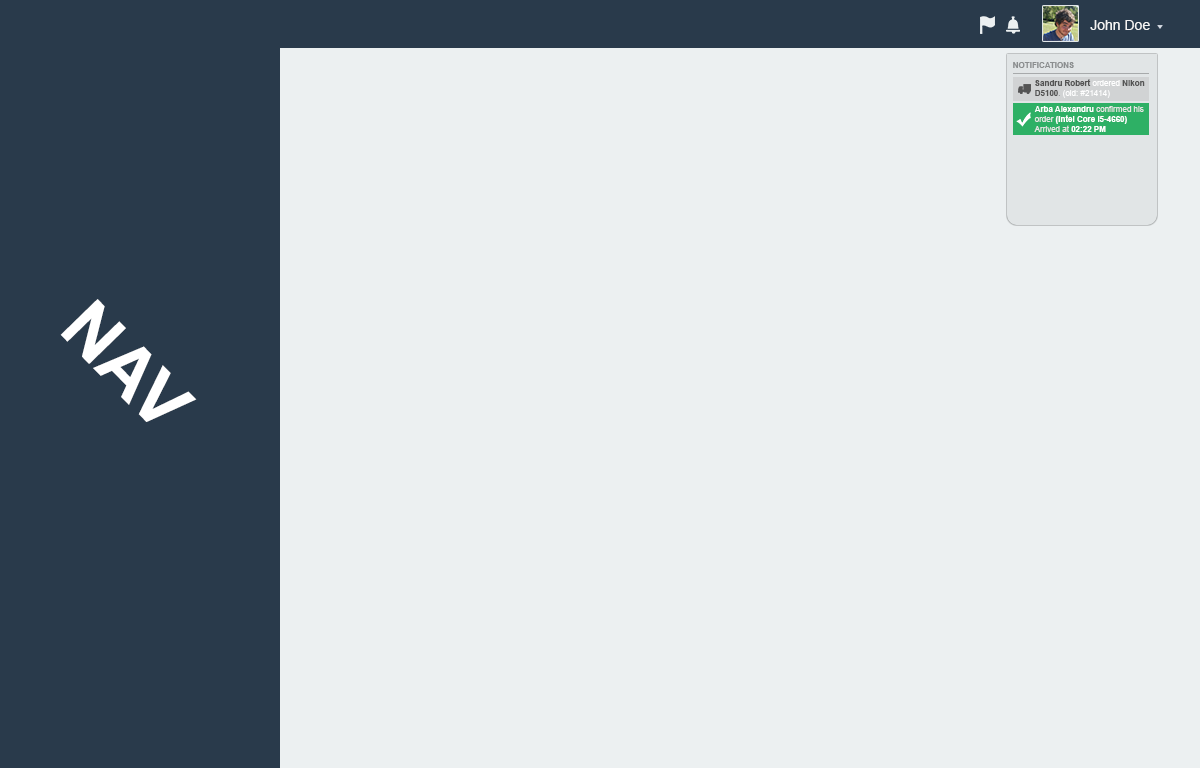
<style>
.page{position:relative;width:1200px;height:768px;background:#ecf0f1}
.page>*{position:absolute;margin:0}
.t1{font:14px "ArialMT";color:#f4f4f4}
.t2{font:8px "Arial-BoldMT";color:#8b8e8f}
.t3{font:8px "Arial-BoldMT";color:#545454}
.t4{font:8px "ArialMT";color:#ffffff}
.t5{font:8px "ArialMT";color:#929595}
.t6{font:8px "Arial-BoldMT";color:#ffffff}
.t7{font:8px "ArialMT";color:#e7e6e6}
.t8{font:72px "Arial-BoldMT";color:#ffffff}
</style>
<div class="page">
<p class="t1" style="left:1090px;top:20px;width:60px;height:10px">John Doe</p>
<p class="t2" style="left:1013px;top:62px;width:61px;height:6px">NOTIFICATIONS</p>
<p class="t3" style="left:1035px;top:79px;width:110px;height:19px">Sandru Robert <span class="t4">ordered </span>Nikon <br>D5100<span class="t5">. </span><span class="t4">(oid: #21414)</span></p>
<p class="t6" style="left:1034px;top:106px;width:110px;height:26px">Arba Alexandru <span class="t7">confirmed his<br>order </span>(Intel Core i5-4660)<br><span class="t7">Arrived at </span>02:22 PM</p>
<p class="t8" style="left:60px;top:299px;width:137px;height:123px;rotate:46deg">NAV</p>
</div>
